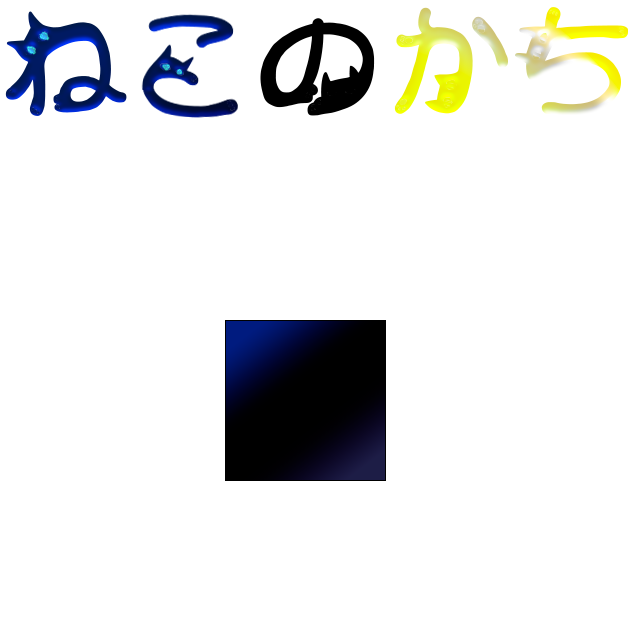
<style>
.page{position:relative;width:640px;height:640px;background:#ffffff}
.page>*{position:absolute;margin:0}
.t1{font:130px "font2985"}
.t2{font:130px "font2985";color:#000000}
</style>
<div class="page">
<p class="t1" style="left:5px;top:11px;width:122px;height:105px;rotate:-4deg">ね</p>
<p class="t1" style="left:515px;top:7px;width:113px;height:109px">ち</p>
<p class="t2" style="left:260px;top:18px;width:115px;height:98px">の</p>
</div>
